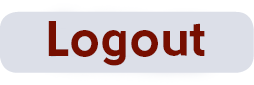
<style>
.page{position:relative;width:254px;height:85px;background:#dcdfe8}
.page>*{position:absolute;margin:0}
.t1{font:50px "Solomon-Sans-Bold";color:#770f00}
</style>
<div class="page">
<p class="t1" style="left:48px;top:21px;width:157px;height:45px">Logout</p>
</div>
